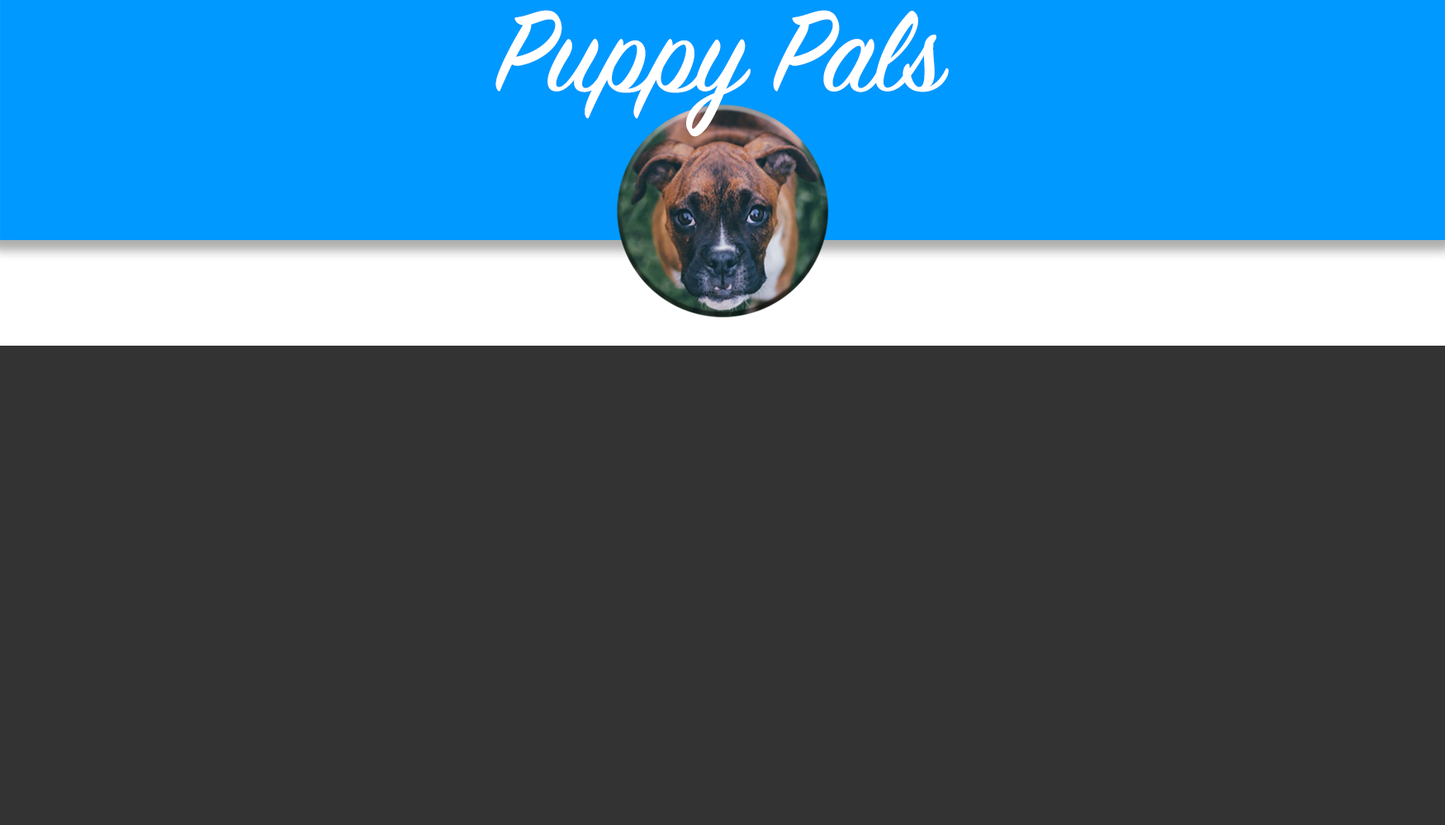
<style>
.page{position:relative;width:1445px;height:825px;background:#333333}
.page>*{position:absolute;margin:0}
.t1{font:127px "SignPainter-HouseScript";color:#ffffff}
</style>
<div class="page">
<p class="t1" style="left:495px;top:10px;width:453px;height:127px">Puppy Pals</p>
</div>
